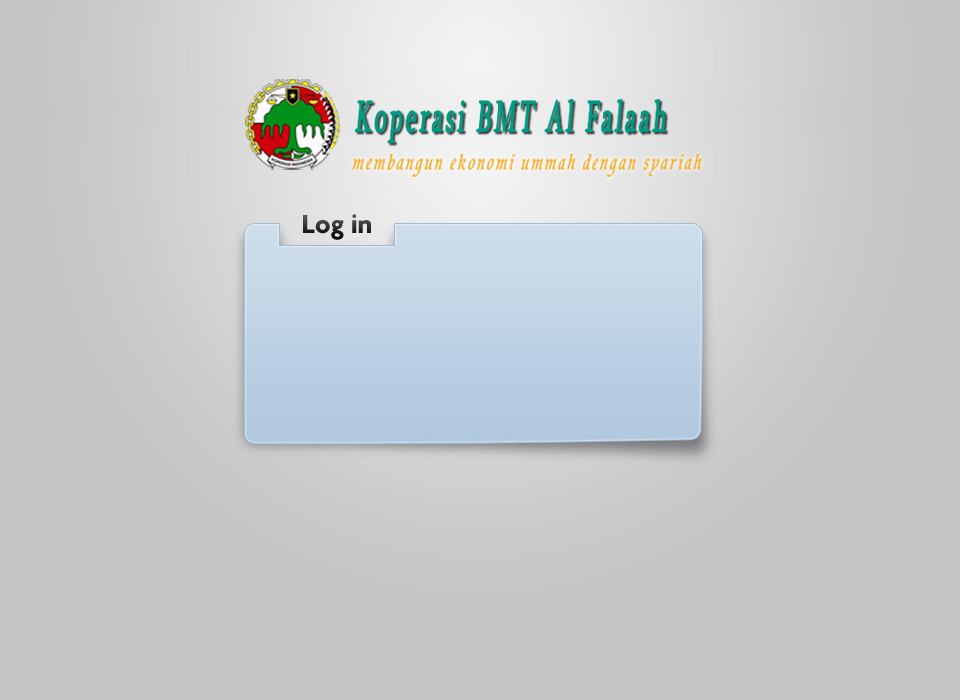
<style>
.page{position:relative;width:960px;height:700px;background:#c4c4c4}
.page>*{position:absolute;margin:0}
.t1{font:45px "Sylfaen";letter-spacing:0.1em;color:#009a83;font-weight:bold;font-style:italic;scale:0.54 1}
.t2{font:27.6px "TirantiSolidLetPlain";letter-spacing:0.1em;color:#f3ae35;font-weight:bold;font-style:italic;scale:0.71 1}
</style>
<div class="page">
<p class="t1" style="left:355px;top:99px;width:311px;height:45px">Koperasi BMT Al Falaah</p>
<p class="t2" style="left:352px;top:154px;width:350px;height:23px">membangun ekonomi ummah dengan syariah</p>
</div>
